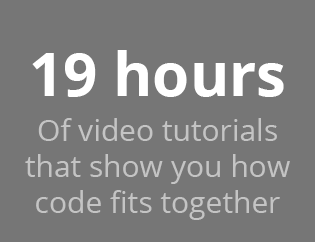
<style>
.page{position:relative;width:315px;height:242px;background:#767676}
.page>*{position:absolute;margin:0}
.t1{font:60px "OpenSans-Bold";color:#ffffff}
.t2{font:30px "OpenSans";color:#c4c4c4}
</style>
<div class="page">
<p class="t1" style="left:32px;top:50px;width:252px;height:47px">19 hours</p>
<p class="t2" style="left:25px;top:118px;width:265px;height:102px;text-align:center">Of video tutorials <br>that show you how code fits together</p>
</div>
